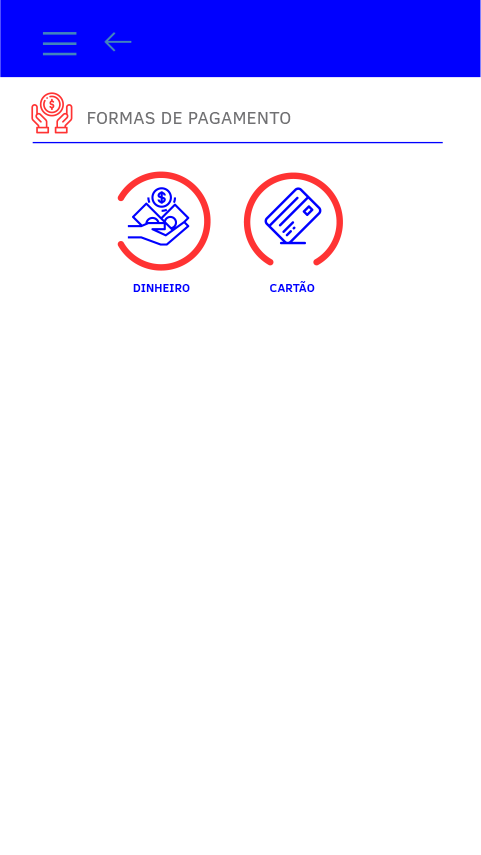
<style>
.page{position:relative;width:481px;height:855px;background:#ffffff}
.page>*{position:absolute;margin:0}
.t1{font:17.7px "ClearSans";letter-spacing:0.02em;color:#707072}
.t2{font:12.1px "ClearSans-Bold";color:#0000ff}
</style>
<div class="page">
<p class="t1" style="left:88px;top:112px;width:203px;height:12px">FORMAS DE PAGAMENTO</p>
<p class="t2" style="left:270px;top:281px;width:45px;height:11px">CARTÃO</p>
<p class="t2" style="left:133px;top:284px;width:57px;height:8px">DINHEIRO</p>
</div>
